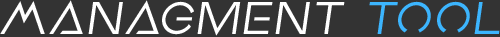
<style>
.page{position:relative;width:500px;height:37px;background:#333333}
.page>*{position:absolute;margin:0}
.t1{font:51.1px "EarthOrbiterSemi-Italic";letter-spacing:0.005em;color:#ffffff}
.t2{font:51.1px "EarthOrbiterSemi-Italic";letter-spacing:0.005em;color:#3cb5fe}
</style>
<div class="page">
<p class="t1" style="left:0px;top:0px;width:500px;height:36px">Managment <span class="t2">Tool</span></p>
</div>
